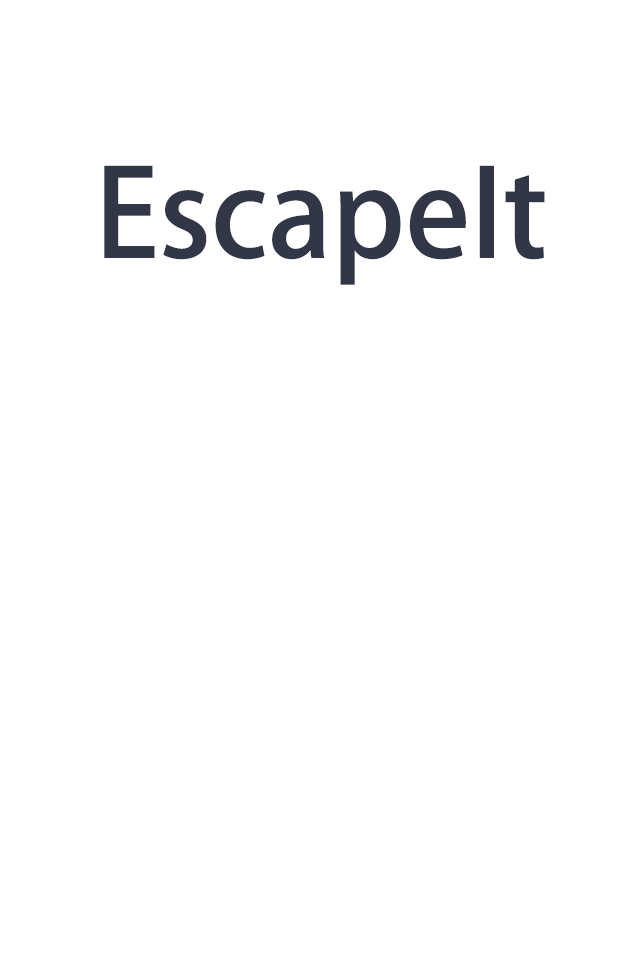
<style>
.page{position:relative;width:640px;height:960px;background:#ffffff}
.page>*{position:absolute;margin:0}
.t1{font:120px "AdobeHeitiStd-Regular";color:#313746}
</style>
<div class="page">
<p class="t1" style="left:104px;top:165px;width:441px;height:120px">EscapeIt</p>
</div>
